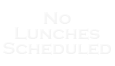
<style>
.page{position:relative;width:115px;height:66px;background:#ffffff}
.page>*{position:absolute;margin:0}
.t1{font:18px/15px "CopperplateGothic-Bold";color:#f6f6f6}
</style>
<div class="page">
<p class="t1" style="left:3px;top:12px;width:108px;height:43px;text-align:center">No<br>Lunches<br>Scheduled</p>
</div>
